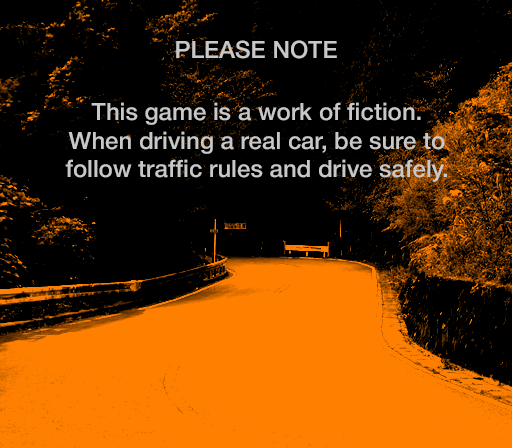
<style>
.page{position:relative;width:512px;height:448px;background:#000000}
.page>*{position:absolute;margin:0}
.t1{font:24px "HelveticaNeue-Medium";color:#c8c8c8}
</style>
<div class="page">
<p class="t1" style="left:176px;top:40px;width:161px;height:19px">PLEASE NOTE</p>
<p class="t1" style="left:65px;top:102px;width:382px;height:80px;text-align:center">This game is a work of fiction.<br>When driving a real car, be sure to<br>follow traffic rules and drive safely.</p>
</div>
